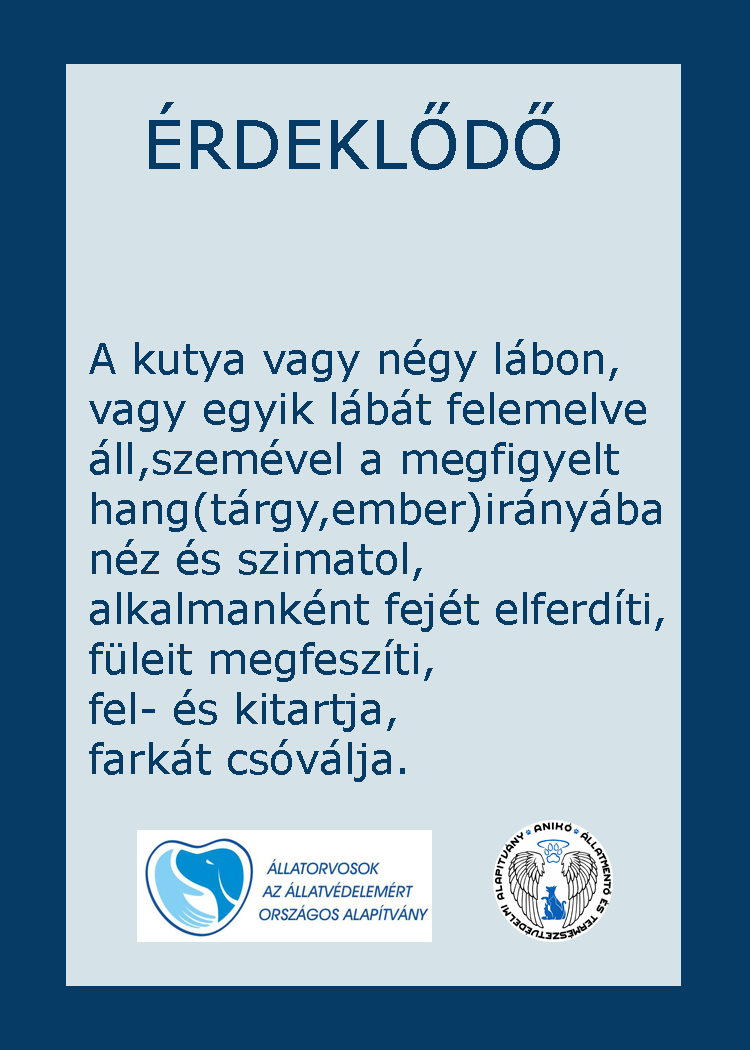
<style>
.page{position:relative;width:750px;height:1050px;background:#d5e2e7}
.page>*{position:absolute;margin:0}
.t1{font:66.7px "Verdana";color:#053b65}
.t2{font:66.7px "GravitateBRK";color:#053b65}
.t3{font:41.7px "Verdana";color:#053b65}
</style>
<div class="page">
<p class="t1" style="left:149px;top:102px;width:411px;height:68px"><span class="t2">        </span>ÉRDEKLŐDŐ</p>
<p class="t3" style="left:89px;top:339px;width:575px;height:443px">A kutya vagy négy lábon,<br>vagy egyik lábát felemelve<br>áll,szemével a megfigyelt <br>hang(tárgy,ember)irányába<br>néz és szimatol,<br>alkalmanként fejét elferdíti,<br>füleit megfeszíti,<br>fel- és kitartja,<br>farkát csóválja.</p>
</div>
